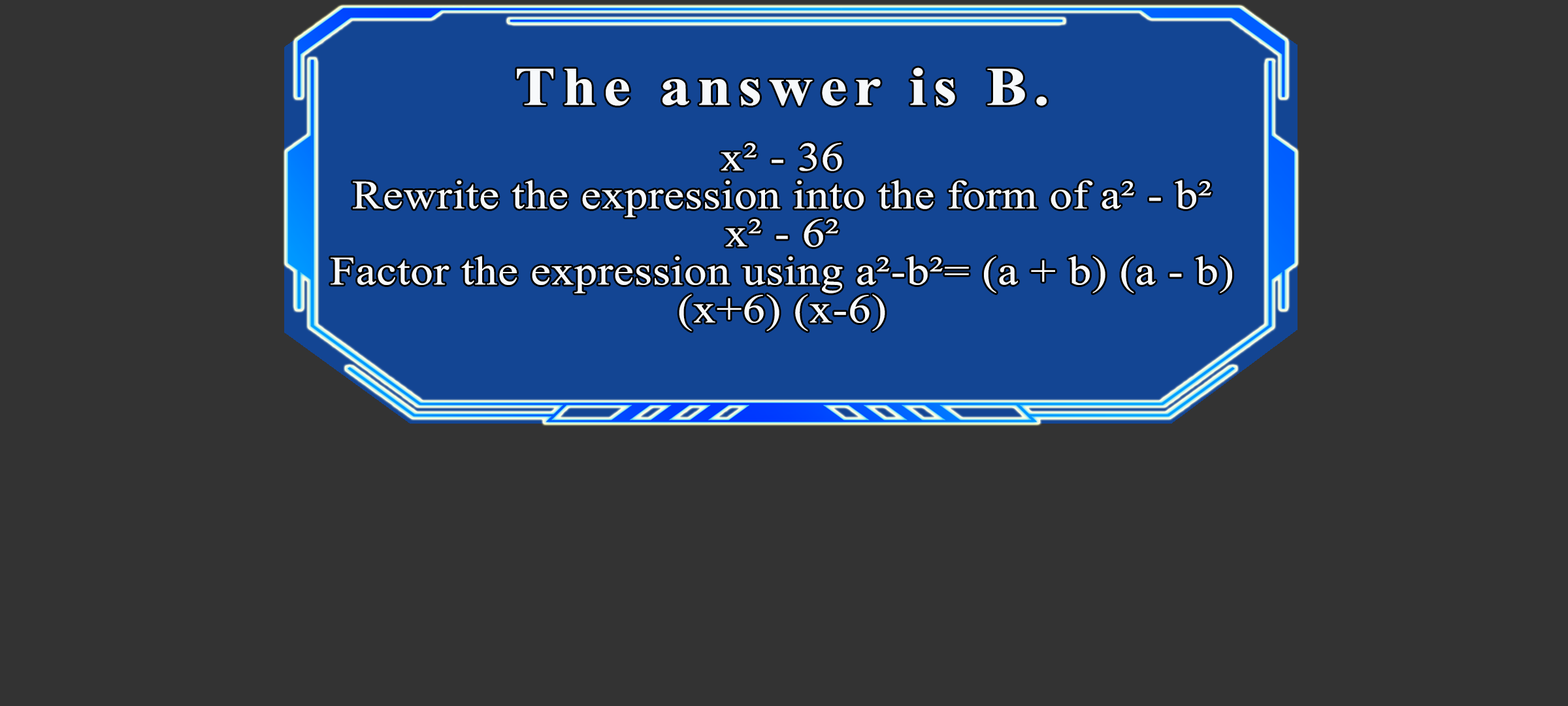
<style>
.page{position:relative;width:1568px;height:706px;background:#333333}
.page>*{position:absolute;margin:0}
.t1{font:54.4px "TimesNewRomanPS-BoldMT";letter-spacing:0.115em;color:#f7f9fb;scale:1.12 1}
.t2{font:40.3px/38px "TimesNewRomanPSMT";letter-spacing:0.015em;color:#f7f9fb;scale:1.12 1}
</style>
<div class="page">
<p class="t1" style="left:517px;top:67px;width:530px;height:39px">The answer is B.</p>
<p class="t2" style="left:331px;top:142px;width:901px;height:189px;text-align:center">x² - 36<br>Rewrite the expression into the form of a² - b²<br>x² - 6²<br>Factor the expression using a²-b²= (a + b) (a - b)<br>(x+6) (x-6)</p>
</div>
